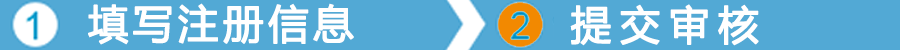
<style>
.page{position:relative;width:900px;height:50px;background:#52a9d5}
.page>*{position:absolute;margin:0}
.t1{font:40px "MicrosoftYaHei";letter-spacing:0.1em;color:#ffffff;font-weight:bold}
.t2{font:40px "MicrosoftYaHei";letter-spacing:0.2em;color:#ffffff;font-weight:bold}
</style>
<div class="page">
<p class="t1" style="left:88px;top:3px;width:266px;height:42px">填写注册信息</p>
<p class="t2" style="left:570px;top:4px;width:189px;height:42px">提交审核</p>
</div>
